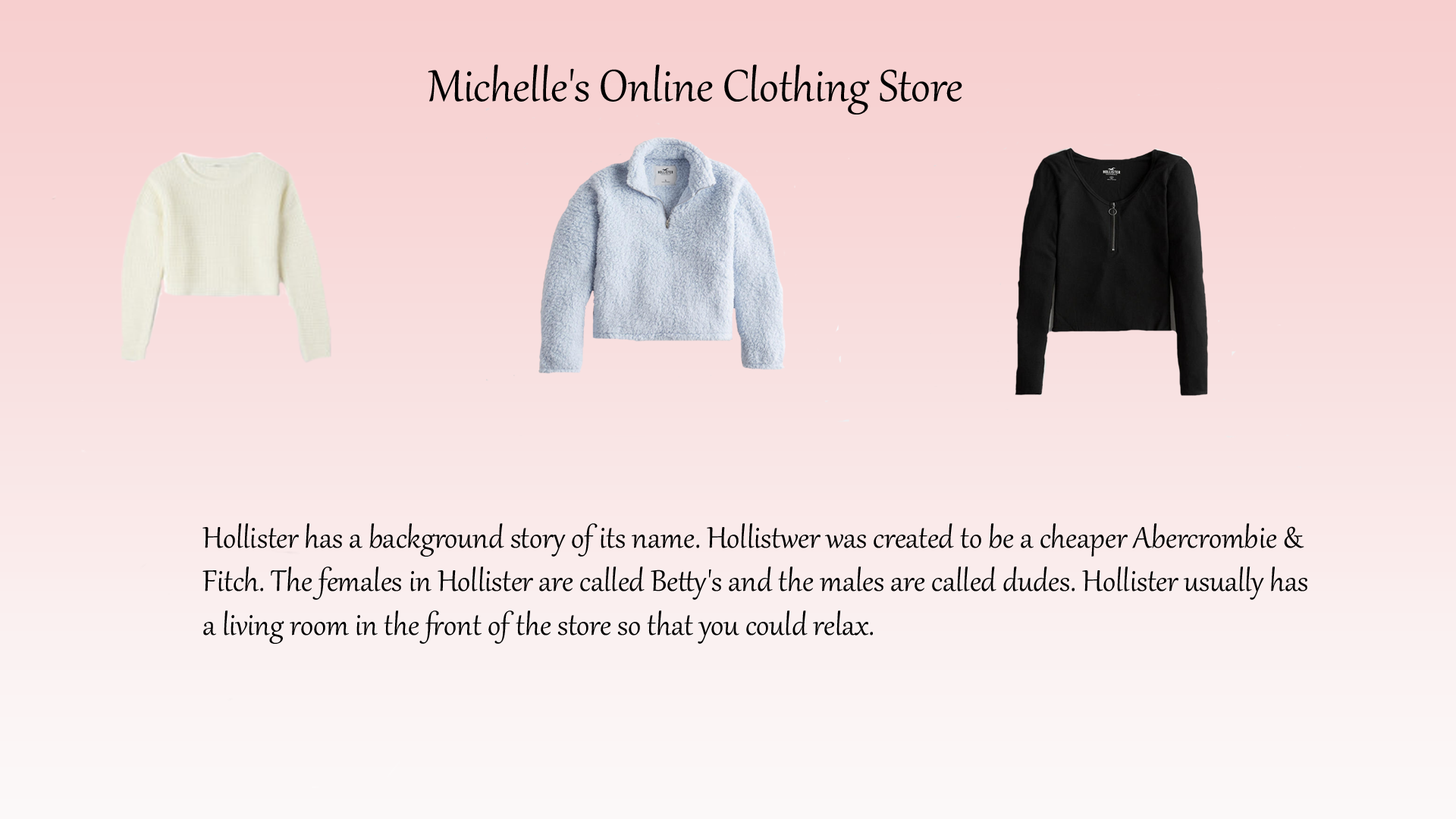
<style>
.page{position:relative;width:1456px;height:819px}
.page>*{position:absolute;margin:0}
.t1{font:54.6px "Gabriola";color:#000000}
.t2{font:36.4px "Gabriola";color:#000000}
</style>
<div class="page">
<p class="t1" style="left:428px;top:64px;width:534px;height:51px">Michelle's Online Clothing Store</p>
<p class="t2" style="left:202px;top:523px;width:1105px;height:121px">Hollister has a background story of its name. Hollistwer was created to be a cheaper Abercrombie &amp; Fitch. The females in Hollister are called Betty's and the males are called dudes. Hollister usually has a living room in the front of the store so that you could relax.</p>
</div>
